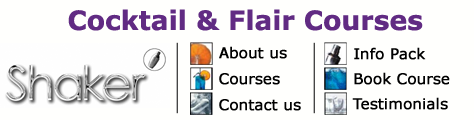
<style>
.page{position:relative;width:474px;height:120px;background:#fffffd}
.page>*{position:absolute;margin:0}
.t1{font:26.7px "Verdana-Bold";color:#612b83}
.t2{font:14.7px "Verdana";color:#000000;font-weight:bold}
</style>
<div class="page">
<p class="t1" style="left:68px;top:9px;width:355px;height:22px">Cocktail &amp; Flair Courses</p>
<p class="t2" style="left:219px;top:46px;width:68px;height:13px">About us</p>
<p class="t2" style="left:354px;top:47px;width:72px;height:13px">Info Pack</p>
<p class="t2" style="left:219px;top:73px;width:61px;height:12px">Courses</p>
<p class="t2" style="left:354px;top:72px;width:96px;height:13px">Book Course</p>
<p class="t2" style="left:219px;top:99px;width:82px;height:12px">Contact us</p>
<p class="t2" style="left:352px;top:97px;width:96px;height:13px">Testimonials</p>
</div>
